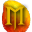
<style>
.page{position:relative;width:32px;height:32px}
.page>*{position:absolute;margin:0}
.t1{font:24px "Morpheus";color:#e4b600}
</style>
<div class="page">
<p class="t1" style="left:5px;top:6px;width:20px;height:24px">M</p>
</div>
